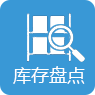
<style>
.page{position:relative;width:95px;height:95px;background:#3998d6}
.page>*{position:absolute;margin:0}
.t1{font:18px "MicrosoftYaHei";color:#ffffff}
</style>
<div class="page">
<p class="t1" style="left:13px;top:66px;width:72px;height:18px">库存盘点</p>
</div>
